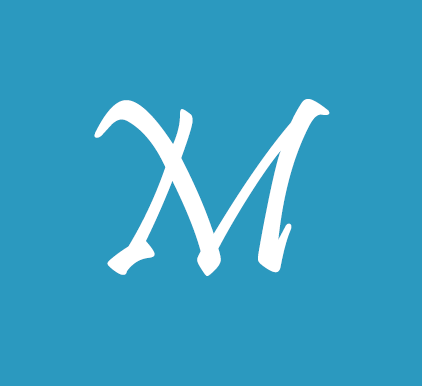
<style>
.page{position:relative;width:422px;height:386px;background:#2b99bf}
.page>*{position:absolute;margin:0}
.t1{font:250px "Pristina-Regular";letter-spacing:-0.075em;color:#ffffff}
</style>
<div class="page">
<p class="t1" style="left:94px;top:99px;width:236px;height:177px">M</p>
</div>
